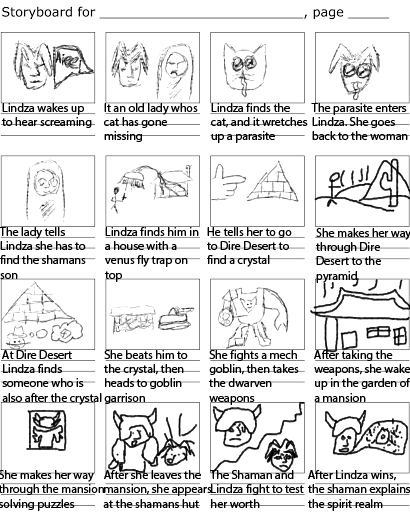
<style>
.page{position:relative;width:410px;height:512px;background:#ffffff}
.page>*{position:absolute;margin:0}
.t1{font:12px "MyriadPro-Regular";color:#000000}
</style>
<div class="page">
<p class="t1" style="left:2px;top:103px;width:90px;height:25px">Lindza wakes up to hear screaming</p>
<p class="t1" style="left:104px;top:103px;width:94px;height:39px">It an old lady whos cat has gone missing</p>
<p class="t1" style="left:211px;top:103px;width:97px;height:40px">Lindza finds the cat, and it wretches up a parasite</p>
<p class="t1" style="left:311px;top:103px;width:97px;height:37px">The parasite enters<br>Lindza. She goes back to the woman</p>
<p class="t1" style="left:0px;top:227px;width:86px;height:52px">The lady tells Lindza she has to find the shamans son</p>
<p class="t1" style="left:105px;top:227px;width:94px;height:55px">Lindza finds him in a house with a venus fly trap on top</p>
<p class="t1" style="left:207px;top:227px;width:85px;height:40px">He tells her to go to Dire Desert to find a crystal</p>
<p class="t1" style="left:316px;top:228px;width:95px;height:55px">She makes her way through Dire Desert to the pyramid</p>
<p class="t1" style="left:2px;top:350px;width:100px;height:55px">At Dire Desert Lindza finds someone who is also after the crystal</p>
<p class="t1" style="left:104px;top:350px;width:84px;height:54px">She beats him to the crystal, then heads to goblin garrison</p>
<p class="t1" style="left:209px;top:350px;width:90px;height:55px">She fights a mech goblin, then takes the dwarven weapons</p>
<p class="t1" style="left:0px;top:470px;width:104px;height:41px">She makes her way through the mansion solving puzzles</p>
<p class="t1" style="left:103px;top:470px;width:109px;height:38px">After she leaves the mansion, she appears at the shamans hut</p>
<p class="t1" style="left:210px;top:470px;width:94px;height:38px">The Shaman and Lindza fight to test her worth</p>
<p class="t1" style="left:308px;top:470px;width:103px;height:41px">After Lindza wins, the shaman explains the spirit realm</p>
</div>
